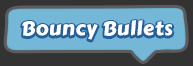
<style>
.page{position:relative;width:193px;height:66px;background:#74b7d7}
.page>*{position:absolute;margin:0}
.t1{font:20px "CarterOne";letter-spacing:0.025em;color:#ffffff}
</style>
<div class="page">
<p class="t1" style="left:22px;top:20px;width:151px;height:20px">Bouncy Bullets</p>
</div>
